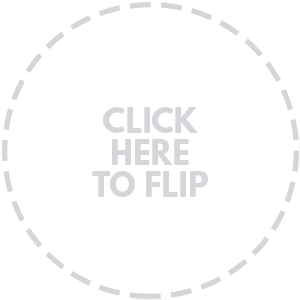
<style>
.page{position:relative;width:300px;height:300px;background:#ffffff}
.page>*{position:absolute;margin:0}
.t1{font:30.4px/32.2px "LeagueSpartan-Bold";color:#d6d6da}
</style>
<div class="page">
<p class="t1" style="left:92px;top:107px;width:116px;height:90px;text-align:center">CLICK<br>HERE<br>TO FLIP</p>
</div>
